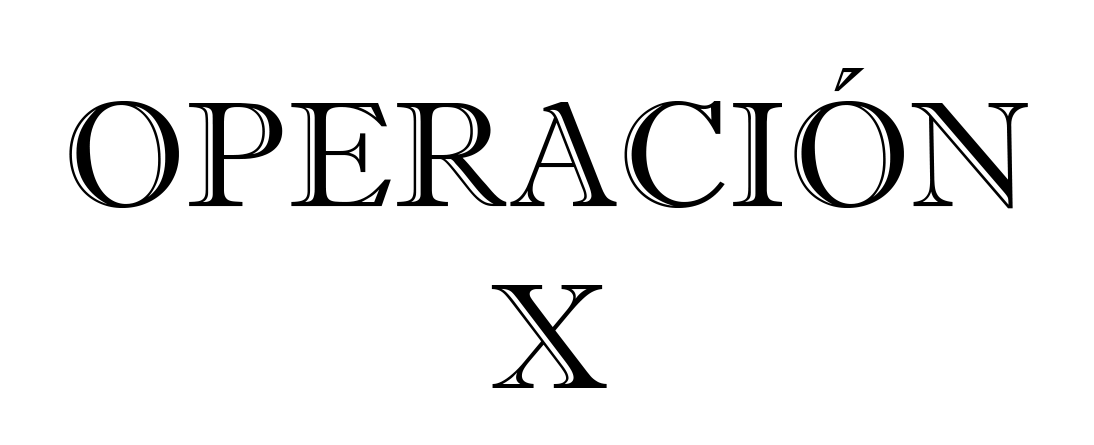
<style>
.page{position:relative;width:1094px;height:445px;background:#ffffff}
.page>*{position:absolute;margin:0}
.t1{font:150px "ImprintMT-Shadow";color:#000000}
</style>
<div class="page">
<p class="t1" style="left:69px;top:68px;width:959px;height:141px">OPERACIÓN</p>
<p class="t1" style="left:491px;top:285px;width:116px;height:103px">X</p>
</div>
